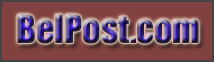
<style>
.page{position:relative;width:214px;height:62px;background:#814141}
.page>*{position:absolute;margin:0}
.t1{font:36px "Impact"}
</style>
<div class="page">
<p class="t1" style="left:17px;top:14px;width:182px;height:30px">BelPost.com</p>
</div>
